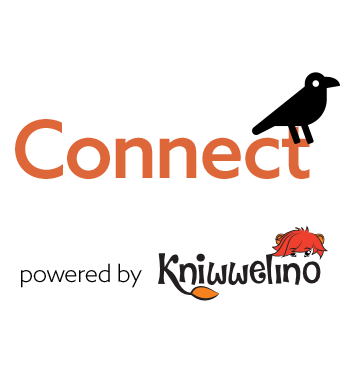
<style>
.page{position:relative;width:356px;height:370px;background:#ffffff}
.page>*{position:absolute;margin:0}
.t1{font:80px "AzoSans-Medium";letter-spacing:-0.025em;color:#de6739}
.t2{font:24px "AzoSans-Light";letter-spacing:-0.025em;color:#010101}
</style>
<div class="page">
<p class="t1" style="left:15px;top:119px;width:295px;height:60px">Connect</p>
<p class="t2" style="left:21px;top:263px;width:121px;height:25px">powered by</p>
</div>
